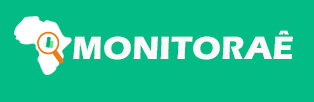
<style>
.page{position:relative;width:314px;height:102px;background:#03bb85}
.page>*{position:absolute;margin:0}
.t1{font:33.3px "ErasITC-Bold";letter-spacing:0.005em;color:#f8f8f8}
</style>
<div class="page">
<p class="t1" style="left:73px;top:30px;width:220px;height:30px">MONITORAÊ</p>
</div>
